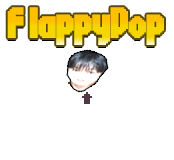
<style>
.page{position:relative;width:174px;height:160px;background:#ffffff}
.page>*{position:absolute;margin:0}
.t1{font:57.3px "Flappy-Bird";letter-spacing:-0.05em;color:#f9d200;scale:1.07 1}
</style>
<div class="page">
<p class="t1" style="left:7px;top:7px;width:157px;height:38px">FlappyPop</p>
</div>
